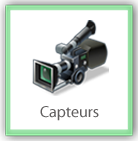
<style>
.page{position:relative;width:138px;height:141px;background:#ffffff}
.page>*{position:absolute;margin:0}
.t1{font:15.9px "MyriadPro-Regular";color:#615f5f}
</style>
<div class="page">
<p class="t1" style="left:40px;top:106px;width:59px;height:15px">Capteurs</p>
</div>
